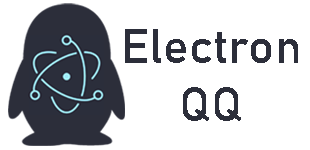
<style>
.page{position:relative;width:310px;height:150px;background:#ffffff}
.page>*{position:absolute;margin:0}
.t1{font:48px "Bahnschrift";color:#2c2e3a}
</style>
<div class="page">
<p class="t1" style="left:125px;top:29px;width:173px;height:92px;text-align:center">Electron<br>QQ</p>
</div>
